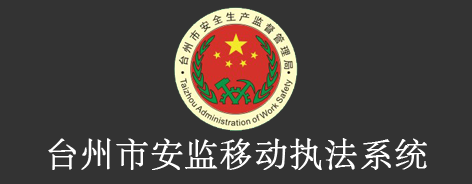
<style>
.page{position:relative;width:472px;height:184px;background:#333333}
.page>*{position:absolute;margin:0}
.t1{font:33.3px "STSong";letter-spacing:0.02em;color:#ffffff;font-weight:bold}
</style>
<div class="page">
<p class="t1" style="left:48px;top:138px;width:379px;height:32px">台州市安监移动执法系统</p>
</div>
